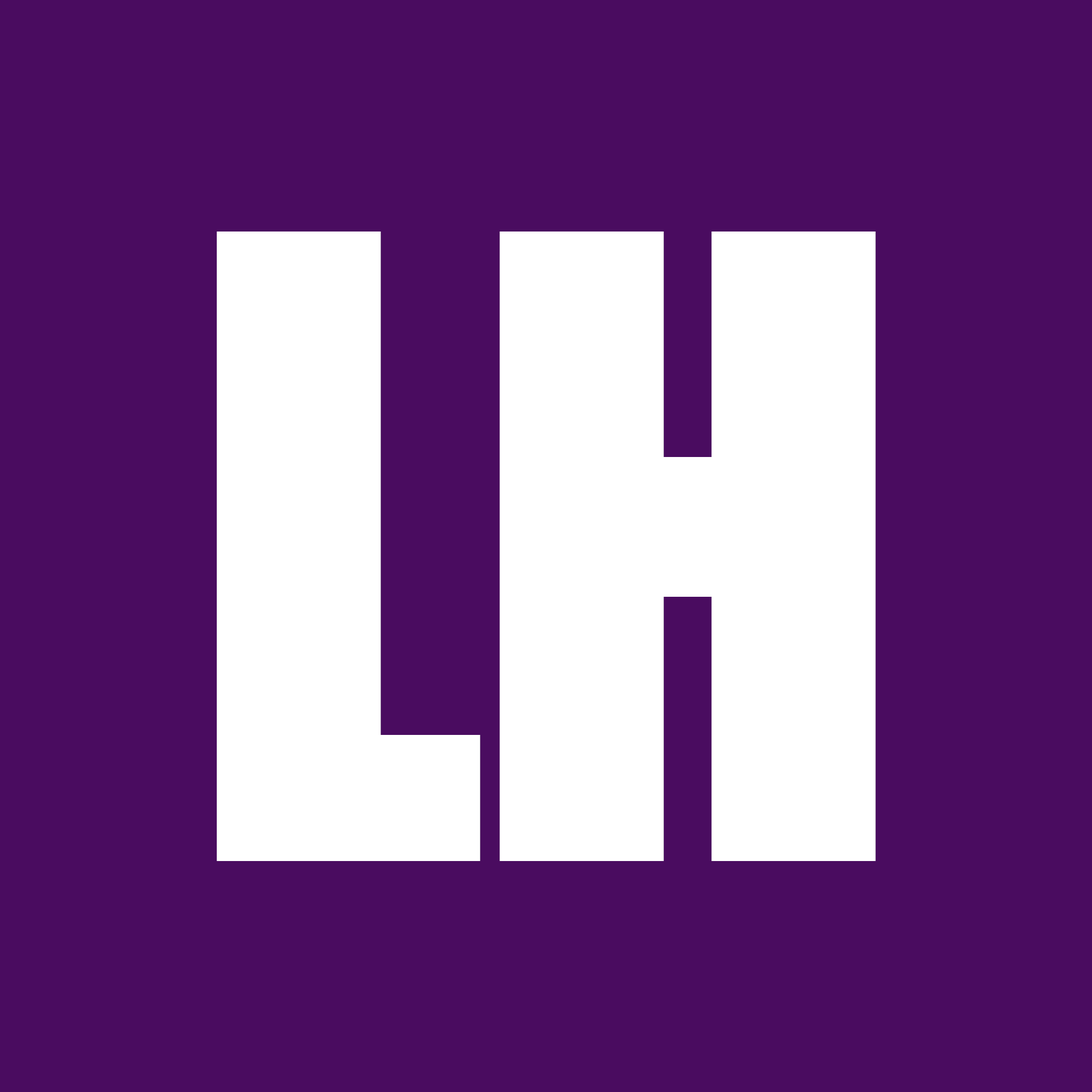
<style>
.page{position:relative;width:1092px;height:1092px;background:#4a0c60}
.page>*{position:absolute;margin:0}
.t1{font:796.2px "Impact";letter-spacing:-0.025em;color:#ffffff}
</style>
<div class="page">
<p class="t1" style="left:217px;top:232px;width:659px;height:629px">LH</p>
</div>
